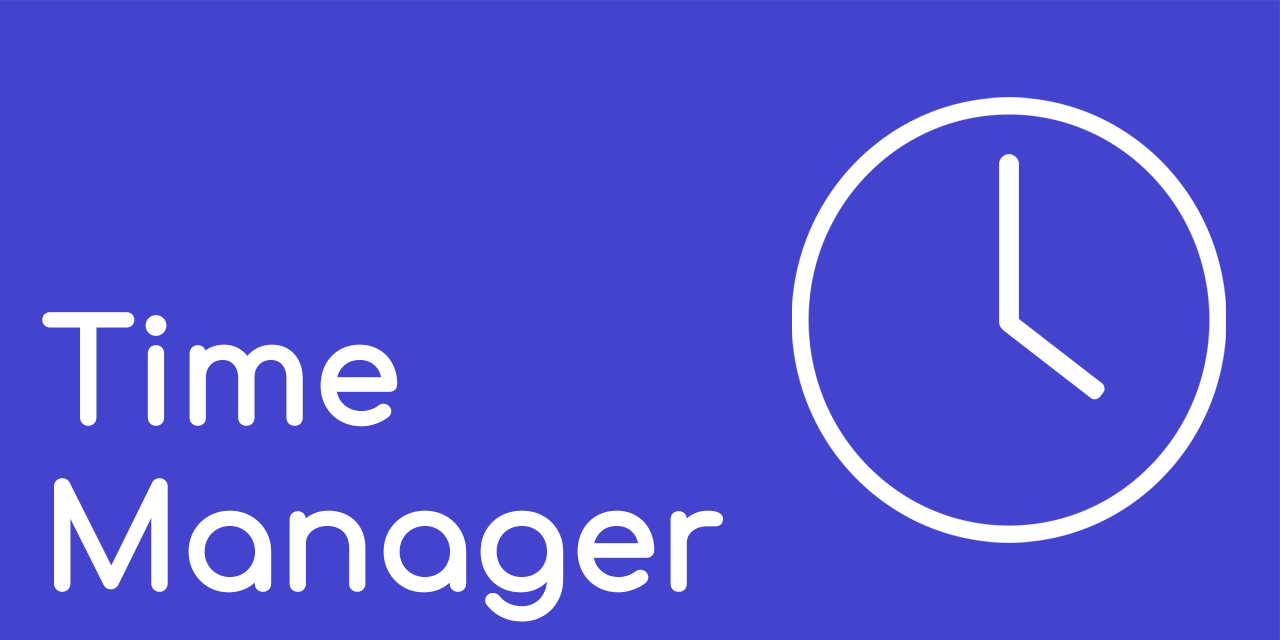
<style>
.page{position:relative;width:1280px;height:640px;background:#4343ce}
.page>*{position:absolute;margin:0}
.t1{font:138.3px "Comfortaa-Regular";color:#ffffff;font-weight:bold}
</style>
<div class="page">
<p class="t1" style="left:42px;top:312px;width:681px;height:310px">Time<br>Manager</p>
</div>
